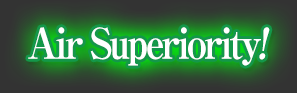
<style>
.page{position:relative;width:297px;height:93px}
.page>*{position:absolute;margin:0}
.t1{font:42px "RyuminPro-ExBold";letter-spacing:-0.08em;color:#ffffff;scale:0.9 1}
.t2{font:42px "RyuminPro-ExBold";letter-spacing:-0.08em;color:#ffffff;font-style:italic;scale:0.9 1}
</style>
<div class="page">
<p class="t1" style="left:28px;top:27px;width:242px;height:39px">Air Superiority<span class="t2">!</span></p>
</div>
